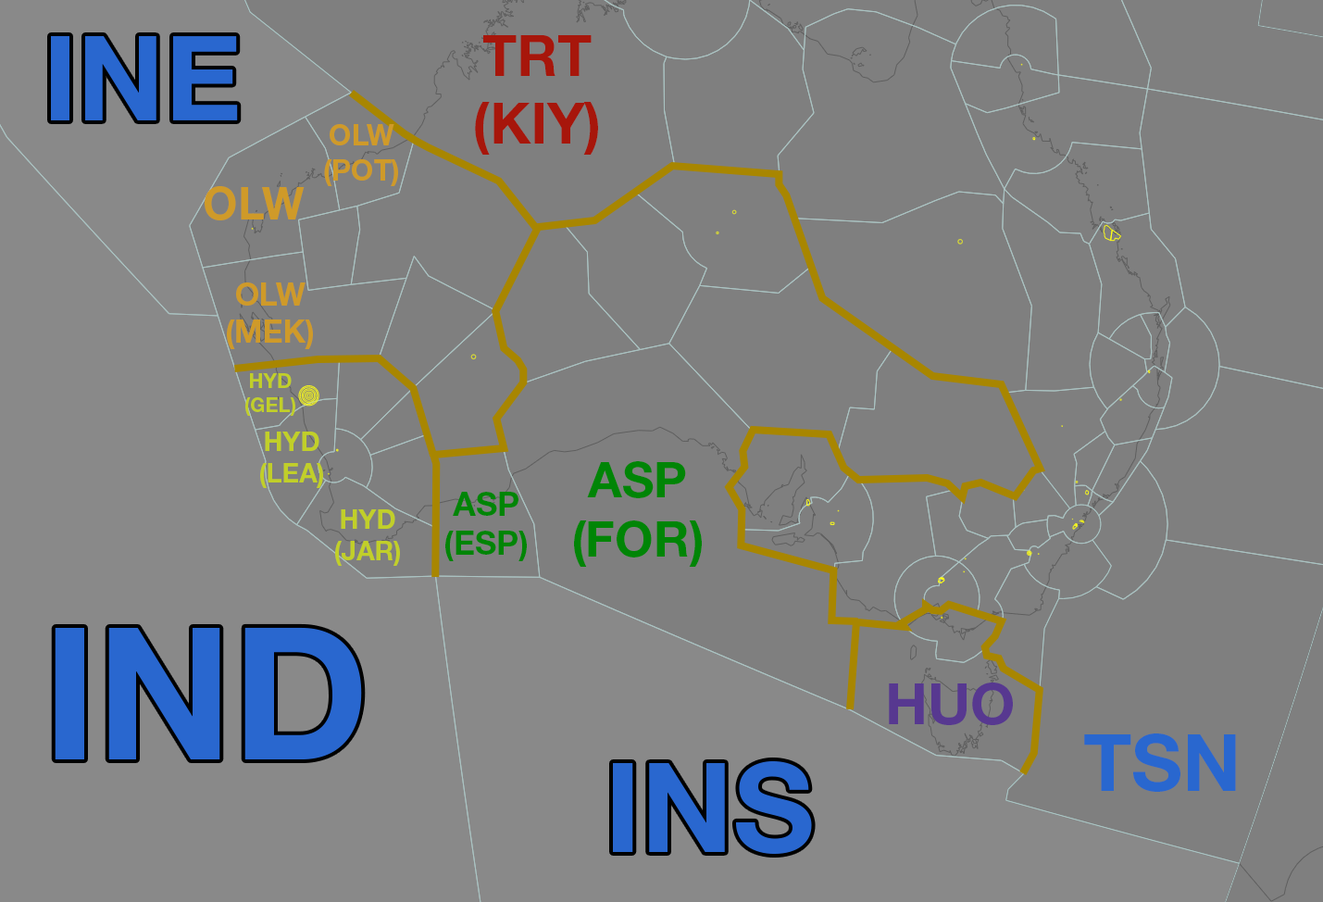
<style>
.page{position:relative;width:1323px;height:902px;background:#7f7f7f}
.page>*{position:absolute;margin:0}
.t1{font:118.2px "HelveticaNeueLTStd-Bd";color:#2967cf}
.t2{font:56.6px "HelveticaNeueLTStd-Bd";color:#a7160b}
.t3{font:29.1px "HelveticaNeueLTStd-Bd";color:#cf9a29}
.t4{font:44.7px "HelveticaNeueLTStd-Bd";color:#cf9a29}
.t5{font:31.3px "HelveticaNeueLTStd-Bd";color:#cf9a29}
.t6{font:20.1px "HelveticaNeueLTStd-Bd";color:#c1cf29}
.t7{font:26.4px "HelveticaNeueLTStd-Bd";color:#c1cf29}
.t8{font:49.7px "HelveticaNeueLTStd-Bd";color:#008506}
.t9{font:33px "HelveticaNeueLTStd-Bd";color:#008506}
.t10{font:183.7px "HelveticaNeueLTStd-Bd";color:#2967cf}
.t11{font:57.5px "HelveticaNeueLTStd-Bd";color:#573890}
.t12{font:79px "HelveticaNeueLTStd-Bd";color:#2967cf}
.t13{font:124.8px "HelveticaNeueLTStd-Bd";color:#2967cf}
</style>
<div class="page">
<p class="t1" style="left:51px;top:36px;width:187px;height:84px">INE</p>
<p class="t2" style="left:475px;top:35px;width:123px;height:120px;text-align:center">TRT<br>(KIY)</p>
<p class="t3" style="left:324px;top:124px;width:74px;height:62px;text-align:center">OLW<br>(POT)</p>
<p class="t4" style="left:205px;top:186px;width:100px;height:34px">OLW</p>
<p class="t5" style="left:227px;top:282px;width:86px;height:67px;text-align:center">OLW<br>(MEK)</p>
<p class="t6" style="left:245px;top:373px;width:50px;height:43px;text-align:center">HYD<br>(GEL)</p>
<p class="t7" style="left:260px;top:431px;width:63px;height:57px;text-align:center">HYD<br>(LEA)</p>
<p class="t8" style="left:574px;top:461px;width:128px;height:105px;text-align:center">ASP<br>(FOR)</p>
<p class="t9" style="left:445px;top:491px;width:82px;height:70px;text-align:center">ASP<br>(ESP)</p>
<p class="t7" style="left:335px;top:509px;width:65px;height:57px;text-align:center">HYD<br>(JAR)</p>
<p class="t10" style="left:55px;top:627px;width:307px;height:132px">IND</p>
<p class="t11" style="left:889px;top:682px;width:124px;height:43px">HUO</p>
<p class="t12" style="left:1084px;top:733px;width:152px;height:58px">TSN</p>
<p class="t13" style="left:613px;top:760px;width:199px;height:93px">INS</p>
</div>
